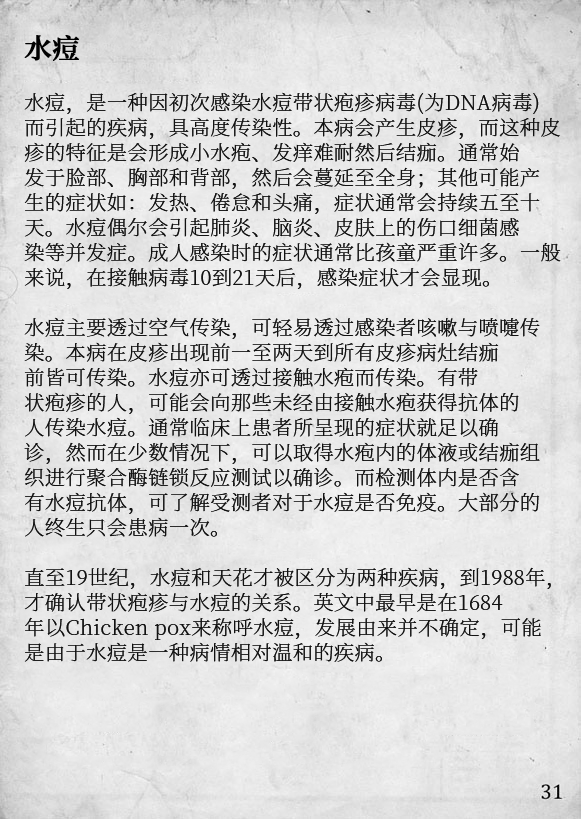
<style>
.page{position:relative;width:581px;height:819px}
.page>*{position:absolute;margin:0}
.t1{font:20.2px/25px "SourceHanSerifCN-ExtraLight";letter-spacing:0.02em;color:#111111}
.t2{font:27.2px/29px "SourceHanSerifCN-SemiBold";letter-spacing:0.02em;color:#000000;font-weight:bold}
</style>
<div class="page">
<p class="t1" style="left:24px;top:35px;width:537px;height:627px"><span class="t2">水痘<br><br></span>水痘，是一种因初次感染水痘带状疱疹病毒(为DNA病毒)<br>而引起的疾病，具高度传染性。本病会产生皮疹，而这种皮<br>疹的特征是会形成小水疱、发痒难耐然后结痂。通常始<br>发于脸部、胸部和背部，然后会蔓延至全身；其他可能产<br>生的症状如：发热、倦怠和头痛，症状通常会持续五至十<br>天。水痘偶尔会引起肺炎、脑炎、皮肤上的伤口细菌感<br>染等并发症。成人感染时的症状通常比孩童严重许多。一般<br>来说，在接触病毒10到21天后，感染症状才会显现。<br><br>水痘主要透过空气传染，可轻易透过感染者咳嗽与喷嚏传<br>染。本病在皮疹出现前一至两天到所有皮疹病灶结痂<br>前皆可传染。水痘亦可透过接触水疱而传染。有带<br>状疱疹的人，可能会向那些未经由接触水疱获得抗体的<br>人传染水痘。通常临床上患者所呈现的症状就足以确<br>诊，然而在少数情况下，可以取得水疱内的体液或结痂组<br>织进行聚合酶链锁反应测试以确诊。而检测体内是否含<br>有水痘抗体，可了解受测者对于水痘是否免疫。大部分的<br>人终生只会患病一次。<br><br>直至19世纪，水痘和天花才被区分为两种疾病，到1988年，<br>才确认带状疱疹与水痘的关系。英文中最早是在1684<br>年以Chicken pox来称呼水痘，发展由来并不确定，可能<br>是由于水痘是一种病情相对温和的疾病。</p>
</div>
